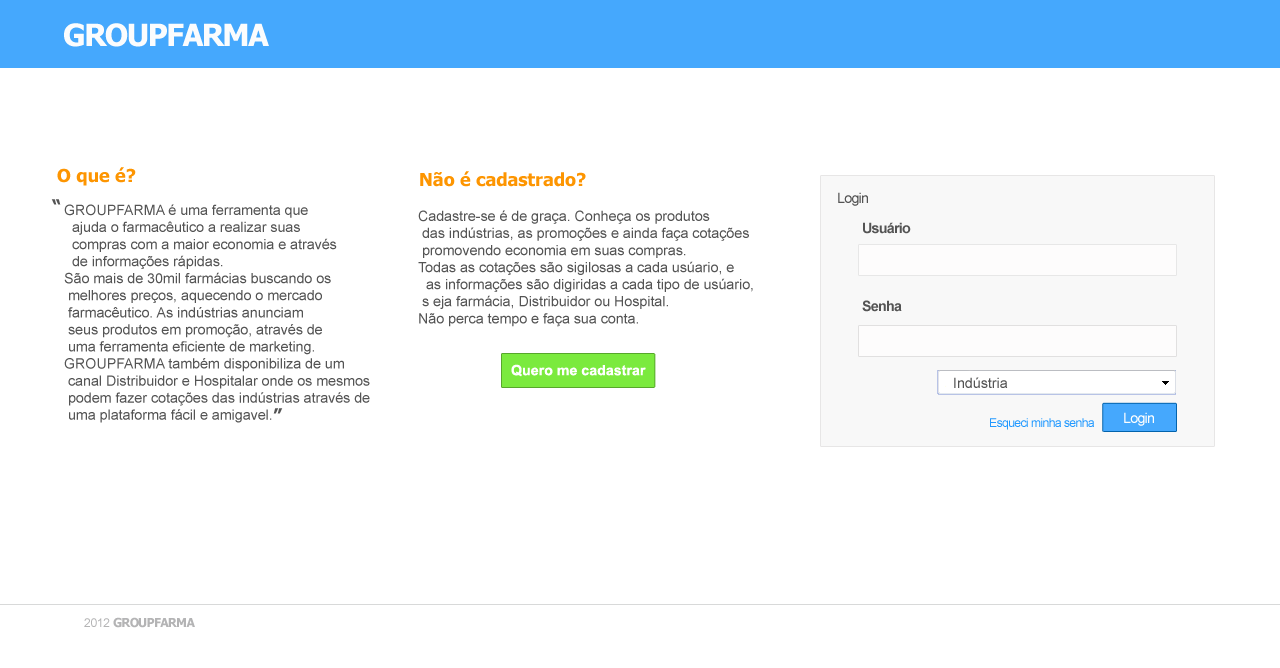
<style>
.page{position:relative;width:1280px;height:668px;background:#ffffff}
.page>*{position:absolute;margin:0}
.t1{font:30.5px "Tahoma-Bold";letter-spacing:-0.05em;color:#fbfcfd}
.t2{font:18px "Tahoma-Bold";color:#fd9501}
.t3{font:14.2px "ArialMT";letter-spacing:-0.05em;color:#545454}
.t4{font:18.3px "Tahoma-Bold";color:#545454}
.t5{font:14.2px "ArialMT";color:#545454}
.t6{font:14.2px "Arial-BoldMT";letter-spacing:-0.05em;color:#545454}
.t7{font:14.2px "Arial-BoldMT";color:#ffffff}
.t8{font:14.2px "ArialMT";letter-spacing:-0.05em;color:#fdfefe}
.t9{font:12.2px "ArialMT";letter-spacing:-0.05em;color:#2299ff}
.t10{font:12.2px "Tahoma-Bold";letter-spacing:-0.05em;color:#b4b4b5}
.t11{font:12.2px "ArialMT";letter-spacing:-0.05em;color:#b4b4b5}
</style>
<div class="page">
<p class="t1" style="left:64px;top:23px;width:205px;height:24px">GROUPFARMA</p>
<p class="t2" style="left:57px;top:167px;width:79px;height:19px">O que é?</p>
<p class="t2" style="left:420px;top:171px;width:166px;height:16px">Não é cadastrado?</p>
<p class="t3" style="left:838px;top:192px;width:30px;height:14px">Login</p>
<p class="t4" style="left:51px;top:199px;width:10px;height:6px">“</p>
<p class="t5" style="left:64px;top:204px;width:306px;height:219px">GROUPFARMA é uma ferramenta que <br>  ajuda o farmacêutico a realizar suas<br>  compras com a maior economia e através <br>  de informações rápidas.<br>São mais de 30mil farmácias buscando os<br> melhores preços, aquecendo o mercado<br> farmacêutico. As indústrias anunciam<br> seus produtos em promoção, através de<br> uma ferramenta eficiente de marketing.<br>GROUPFARMA também disponibiliza de um<br> canal Distribuidor e Hospitalar onde os mesmos  <br> podem fazer cotações das indústrias através de <br> uma plataforma fácil e amigavel.</p>
<p class="t5" style="left:418px;top:210px;width:335px;height:117px">Cadastre-se é de graça. Conheça os produtos<br> das indústrias, as promoções e ainda faça cotações<br> promovendo economia em suas compras.<br>Todas as cotações são sigilosas a cada usúario, e<br>  as informações são digiridas a cada tipo de usúario,<br> s eja farmácia, Distribuidor ou Hospital.<br>Não perca tempo e faça sua conta.</p>
<p class="t6" style="left:863px;top:222px;width:48px;height:12px">Usuário</p>
<p class="t6" style="left:862px;top:300px;width:40px;height:12px">Senha</p>
<p class="t7" style="left:511px;top:364px;width:135px;height:13px">Quero me cadastrar</p>
<p class="t5" style="left:954px;top:377px;width:54px;height:11px">Indústria</p>
<p class="t4" style="left:273px;top:408px;width:10px;height:6px">”</p>
<p class="t8" style="left:1124px;top:412px;width:30px;height:14px">Login</p>
<p class="t9" style="left:990px;top:418px;width:104px;height:12px">Esqueci minha senha</p>
<p class="t10" style="left:84px;top:617px;width:111px;height:11px"><span class="t11">2012</span> GROUPFARMA</p>
</div>
